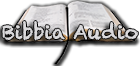
<style>
.page{position:relative;width:140px;height:66px;background:#ffffff}
.page>*{position:absolute;margin:0}
.t1{font:19px "Chalkduster";color:#dbdadc}
</style>
<div class="page">
<p class="t1" style="left:2px;top:21px;width:136px;height:20px">Bibbia Audio</p>
</div>
